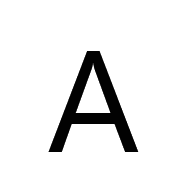
<style>
.page{position:relative;width:192px;height:192px;background:#ffffff}
.page>*{position:absolute;margin:0}
.t1{font:144px "NirmalaUI";color:#020202}
</style>
<div class="page">
<p class="t1" style="left:48px;top:51px;width:91px;height:101px">A</p>
</div>
